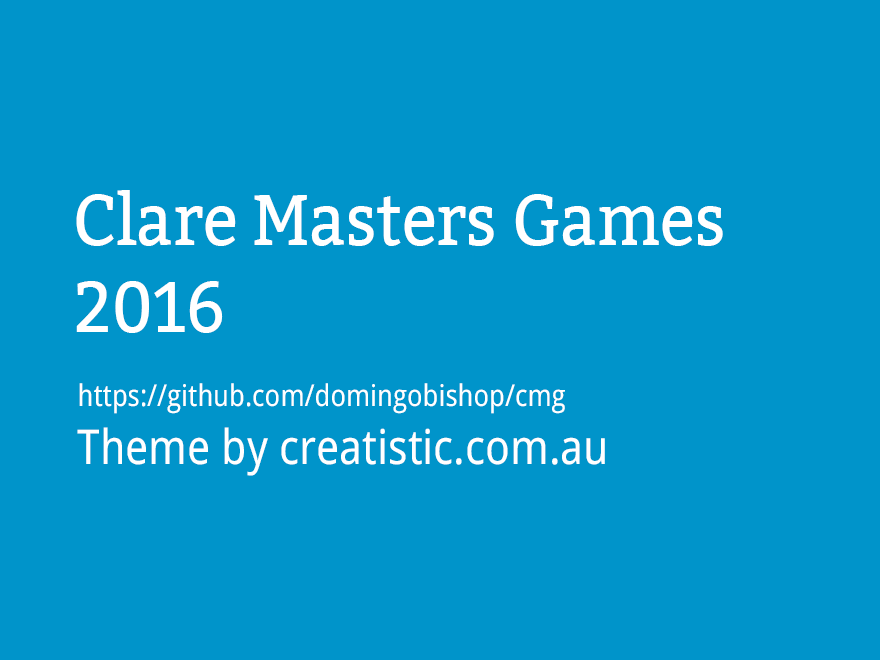
<style>
.page{position:relative;width:880px;height:660px;background:#0094ca}
.page>*{position:absolute;margin:0}
.t1{font:72px "Bitter-Regular";color:#ffffff;scale:0.9 1}
.t2{font:30px "DroidSans";color:#ffffff;scale:0.9 1}
.t3{font:48px "DroidSans";color:#ffffff;scale:0.9 1}
</style>
<div class="page">
<p class="t1" style="left:76px;top:190px;width:647px;height:143px">Clare Masters Games <br>2016</p>
<p class="t2" style="left:77px;top:383px;width:528px;height:93px">https://github.com/domingobishop/cmg<br><span class="t3">Theme by creatistic.com.au</span></p>
</div>
